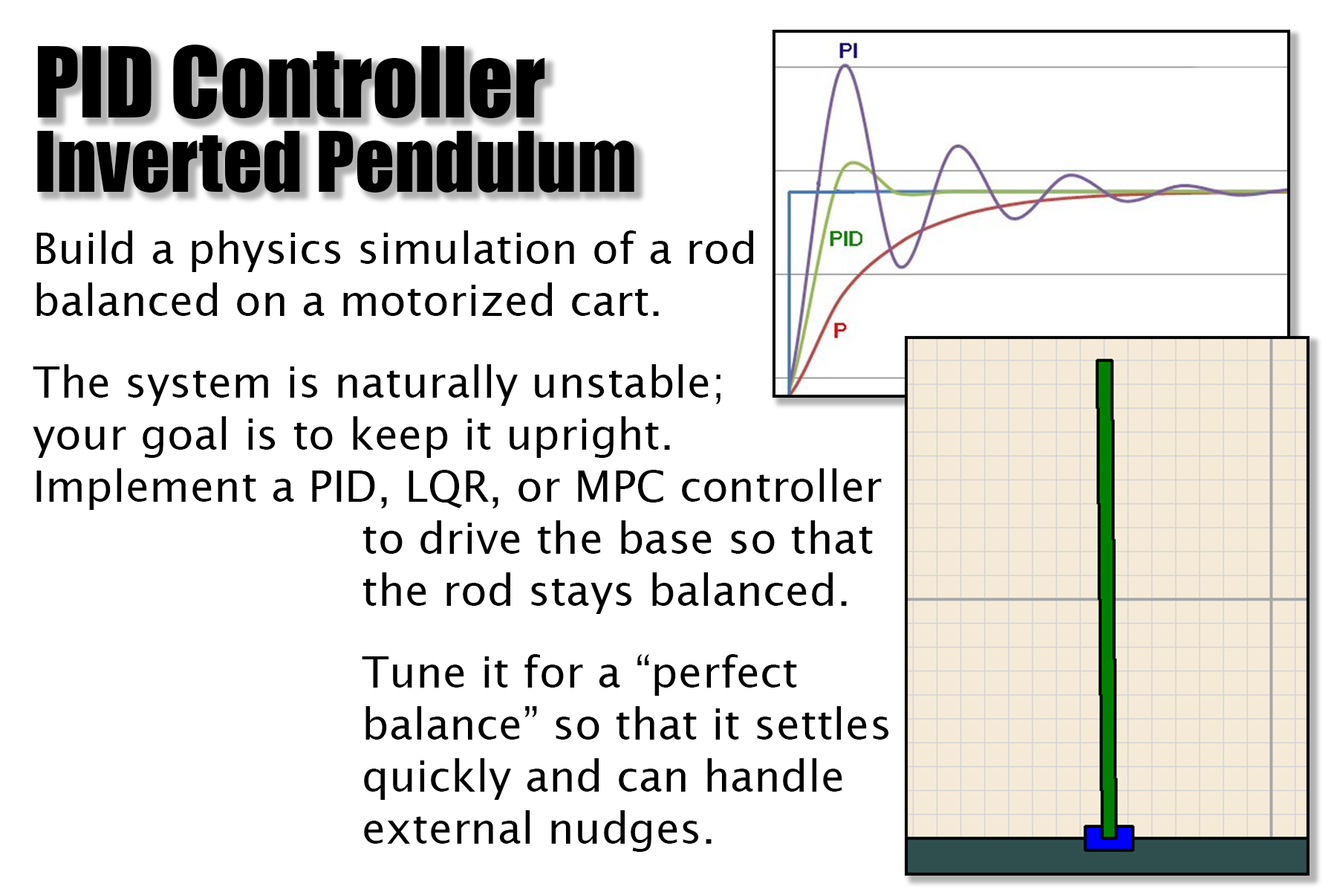
<style>
.page{position:relative;width:1337px;height:892px;background:#ffffff}
.page>*{position:absolute;margin:0}
.t1{font:77.4px/74.3px "Impact";color:#000000}
.t2{font:89.8px "Impact";color:#000000}
.t3{font:43.3px "LucidaSans";color:#000000}
</style>
<div class="page">
<p class="t1" style="left:37px;top:45px;width:598px;height:147px"><span class="t2">PID Controller<br></span>Inverted Pendulum</p>
<p class="t3" style="left:33px;top:230px;width:856px;height:621px">Build a physics simulation of a rod<br>balanced on a motorized cart. <br><br>The system is naturally unstable; <br>your goal is to keep it upright. <br>Implement a PID, LQR, or MPC controller <br>                        to drive the base so that<br>                        the rod stays balanced.<br><br>                        Tune it for a “perfect<br>                        balance” so that it settles<br>                        quickly and can handle<br>                        external nudges.</p>
</div>
